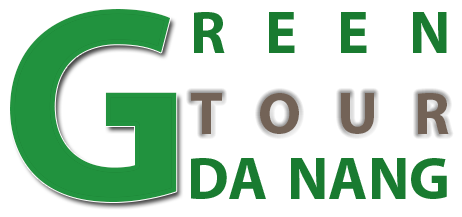
<style>
.page{position:relative;width:462px;height:217px;background:#ffffff}
.page>*{position:absolute;margin:0}
.t1{font:280px "MyriadPro-Bold";color:#197b30;text-transform:uppercase}
.t2{font:60px "MyriadPro-Bold";color:#197b30;text-transform:uppercase}
.t3{font:60px "MyriadPro-Bold";color:#736357;text-transform:uppercase}
</style>
<div class="page">
<p class="t1" style="left:10px;top:9px;width:167px;height:193px">G</p>
<p class="t2" style="left:194px;top:12px;width:253px;height:41px">reen</p>
<p class="t3" style="left:191px;top:93px;width:258px;height:41px">TOUR</p>
<p class="t2" style="left:191px;top:158px;width:256px;height:41px">Da NANG</p>
</div>
